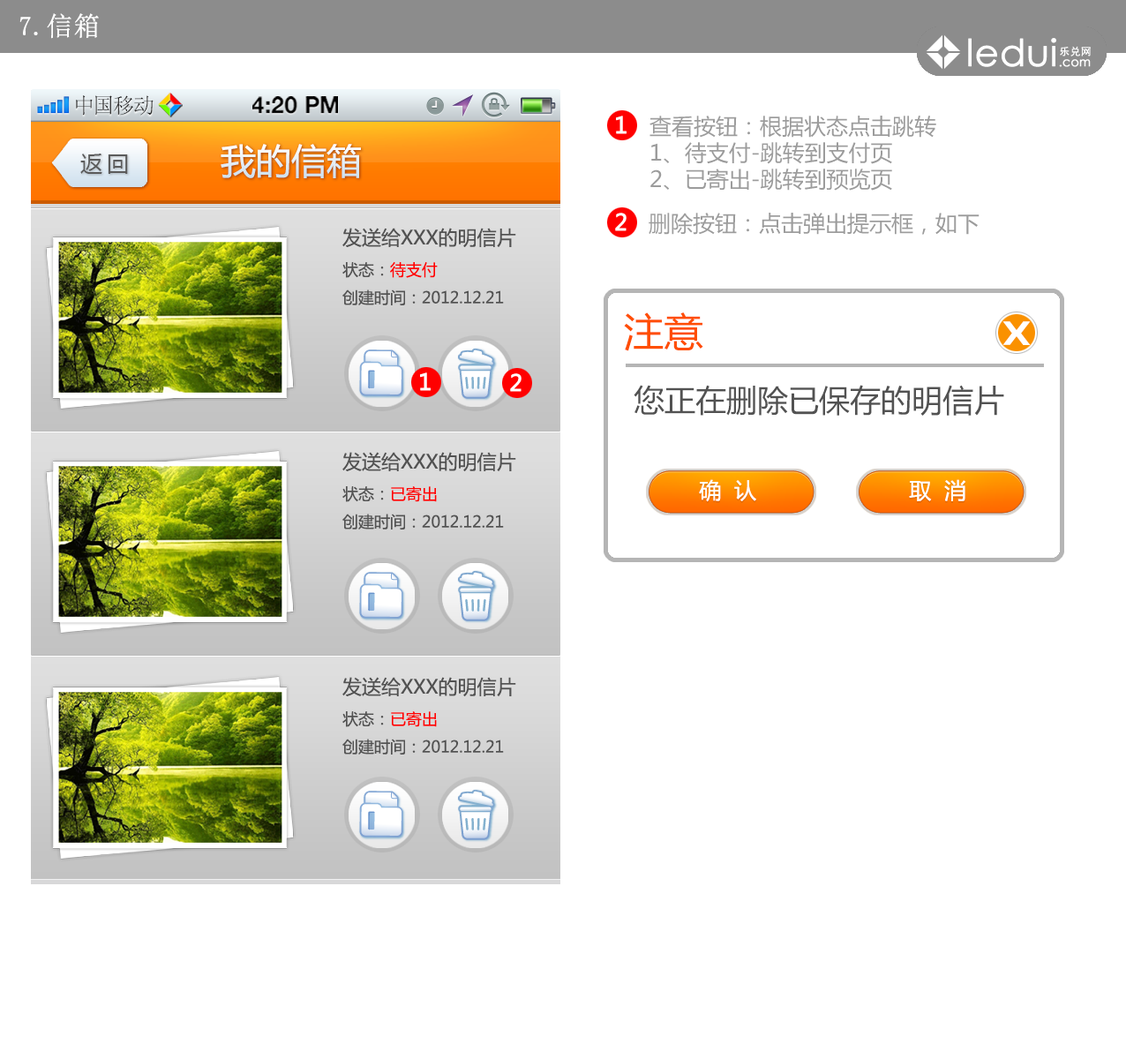
<style>
.page{position:relative;width:1126px;height:1059px;background:#ffffff}
.page>*{position:absolute;margin:0}
.t1{font:26.5px "SimSun";color:#ffffff;font-weight:bold}
.t2{font:21.5px "SimSun";color:#414141}
.t3{font:23.1px "HelveticaNeue-Bold";color:#000000;text-transform:uppercase}
.t4{font:22.1px "MicrosoftYaHei";color:#9c9c9c}
.t5{font:35.3px "MicrosoftYaHei";color:#e6eff6}
.t6{font:22.1px "MicrosoftYaHei";letter-spacing:0.2em;color:#5b5b5b}
.t7{font:15.9px "MicrosoftYaHei";color:#525252}
.t8{font:19.4px "MicrosoftYaHei";color:#525252}
.t9{font:15.9px "MicrosoftYaHei";color:#ff0000}
.t10{font:39.7px "MicrosoftYaHei";color:#ff4e00}
.t11{font:35.3px "ç»å¸ç»¼èºä½ç®-regular";color:#ffffff}
.t12{font:30.9px "MicrosoftYaHei";color:#525252}
.t13{font:22.1px "MicrosoftYaHei";color:#ffffff}
</style>
<div class="page">
<p class="t1" style="left:19px;top:13px;width:80px;height:26px">7.信箱</p>
<p class="t2" style="left:76px;top:95px;width:78px;height:21px">中国移动</p>
<p class="t3" style="left:252px;top:96px;width:86px;height:18px">4:20 PM</p>
<p class="t4" style="left:649px;top:116px;width:287px;height:75px">查看按钮：根据状态点击跳转<br>1、待支付-跳转到支付页<br>2、已寄出-跳转到预览页</p>
<p class="t5" style="left:221px;top:144px;width:140px;height:34px">我的信箱</p>
<p class="t6" style="left:80px;top:154px;width:48px;height:20px">返回</p>
<p class="t4" style="left:649px;top:213px;width:331px;height:22px">删除按钮：点击弹出提示框，如下</p>
<p class="t7" style="left:342px;top:228px;width:174px;height:77px"><span class="t8">发送给XXX的明信片<br></span>状态：<span class="t9">待支付<br></span>创建时间：2012.12.21</p>
<p class="t10" style="left:624px;top:312px;width:79px;height:39px">注意</p>
<p class="t11" style="left:1002px;top:321px;width:29px;height:24px">X</p>
<p class="t12" style="left:634px;top:385px;width:370px;height:31px">您正在删除已保存的明信片</p>
<p class="t7" style="left:342px;top:452px;width:174px;height:77px"><span class="t8">发送给XXX的明信片<br></span>状态：<span class="t9">已寄出<br></span>创建时间：2012.12.21</p>
<p class="t13" style="left:699px;top:479px;width:57px;height:23px">确  认</p>
<p class="t13" style="left:909px;top:479px;width:56px;height:22px">取  消</p>
<p class="t7" style="left:342px;top:677px;width:174px;height:78px"><span class="t8">发送给XXX的明信片<br></span>状态：<span class="t9">已寄出<br></span>创建时间：2012.12.21</p>
</div>
